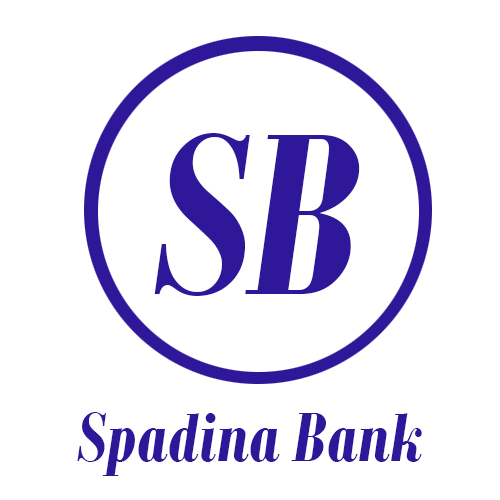
<style>
.page{position:relative;width:500px;height:500px;background:#ffffff}
.page>*{position:absolute;margin:0}
.t1{font:250px "BodoniMTCondensed-BoldItalic";color:#2f1799}
.t2{font:75px "BodoniMTCondensed-BoldItalic";color:#2f1799}
</style>
<div class="page">
<p class="t1" style="left:154px;top:133px;width:206px;height:163px">SB</p>
<p class="t2" style="left:77px;top:412px;width:345px;height:64px">Spadina Bank</p>
</div>
